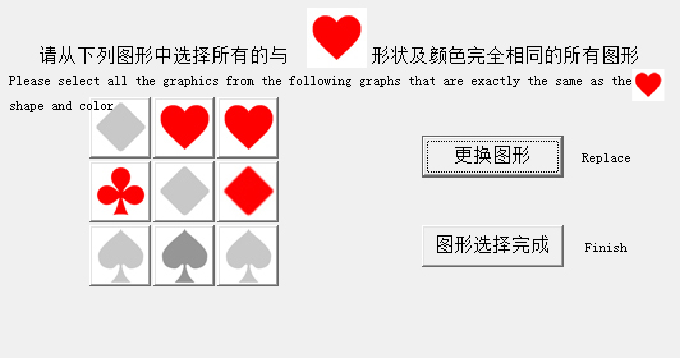
<style>
.page{position:relative;width:680px;height:358px;background:#f0f0f0}
.page>*{position:absolute;margin:0}
.t1{font:14px "SimSun";color:#010101}
</style>
<div class="page">
<p class="t1" style="left:9px;top:76px;width:622px;height:36px">Please select all the graphics from the following graphs that are exactly the same as the <br>shape and color</p>
<p class="t1" style="left:582px;top:153px;width:48px;height:11px">Replace</p>
<p class="t1" style="left:585px;top:243px;width:42px;height:9px">Finish</p>
</div>
